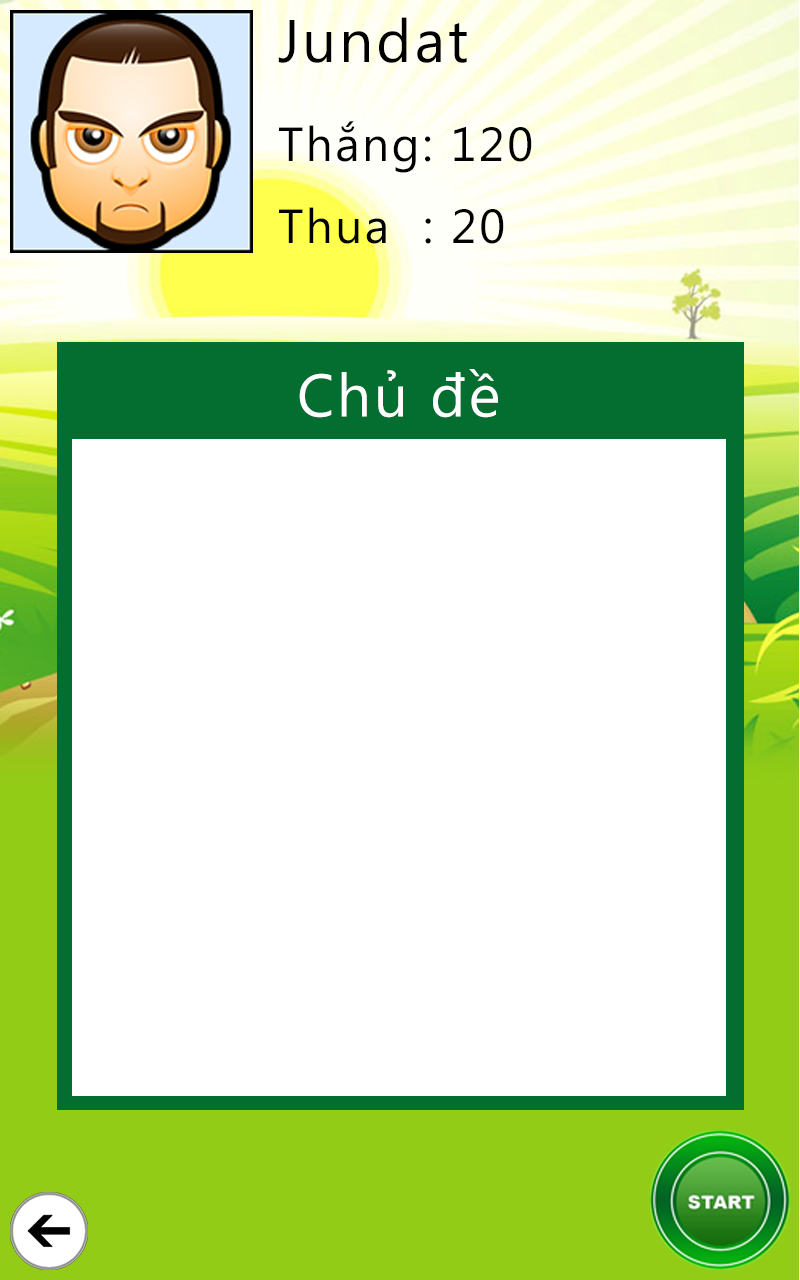
<style>
.page{position:relative;width:800px;height:1280px;background:#ffffff}
.page>*{position:absolute;margin:0}
.t1{font:60px "SegoeUI";letter-spacing:0.05em;color:#000000}
.t2{font:48px "SegoeUI";letter-spacing:0.05em;color:#000000}
.t3{font:59.9px "SegoeUI";letter-spacing:0.05em;color:#ffffff}
</style>
<div class="page">
<p class="t1" style="left:278px;top:17px;width:189px;height:46px">Jundat</p>
<p class="t2" style="left:279px;top:121px;width:253px;height:52px">Thắng: 120</p>
<p class="t2" style="left:279px;top:207px;width:225px;height:37px">Thua  : 20</p>
<p class="t3" style="left:299px;top:369px;width:199px;height:49px">Chủ đề</p>
</div>
